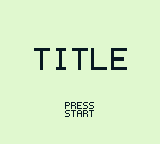
<style>
.page{position:relative;width:160px;height:144px;background:#e0f8cf}
.page>*{position:absolute;margin:0}
.t1{font:50px "Coder's-Crux";color:#071821;text-transform:uppercase}
.t2{font:16px/8px "Coder's-Crux";color:#071821;text-transform:uppercase}
</style>
<div class="page">
<p class="t1" style="left:34px;top:48px;width:93px;height:22px">TITLE</p>
<p class="t2" style="left:65px;top:102px;width:29px;height:15px">Press<br>Start</p>
</div>
